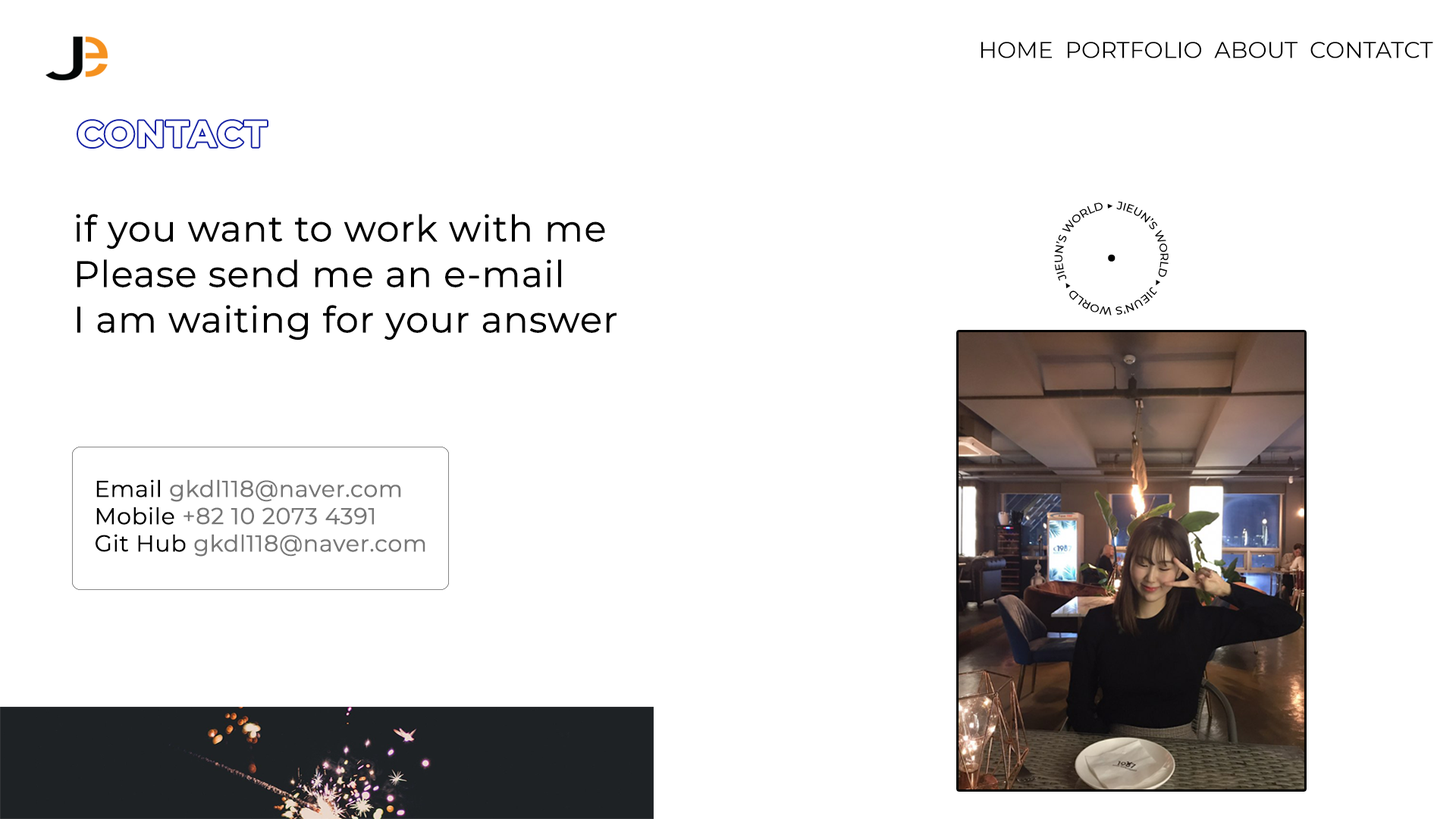
<style>
.page{position:relative;width:1456px;height:819px;background:#ffffff}
.page>*{position:absolute;margin:0}
.t1{font:22.7px "Montserrat-Regular";color:#000000}
.t2{font:36.4px "Montserrat-Bold";color:#ffffff;font-weight:bold}
.t3{font:36.4px/45.5px "Montserrat-Regular";color:#000000;font-weight:bold}
.t4{font:22.7px/27.3px "Montserrat-Regular";color:#777777;font-weight:bold}
.t5{font:22.7px/27.3px "Montserrat-Regular";color:#000000;font-weight:bold}
</style>
<div class="page">
<p class="t1" style="left:981px;top:42px;width:452px;height:16px">HOME  PORTFOLIO  ABOUT  CONTATCT</p>
<p class="t2" style="left:78px;top:121px;width:189px;height:26px">CONTACT</p>
<p class="t3" style="left:76px;top:214px;width:541px;height:126px">if you want to work with me <br>Please send me an e-mail<br>I am waiting for your answer</p>
<p class="t4" style="left:96px;top:479px;width:329px;height:78px"><span class="t5">Email </span>gkdl118@naver.com<br><span class="t5">Mobile </span>+82 10 2073 4391<br><span class="t5">Git Hub </span>gkdl118@naver.com</p>
</div>
